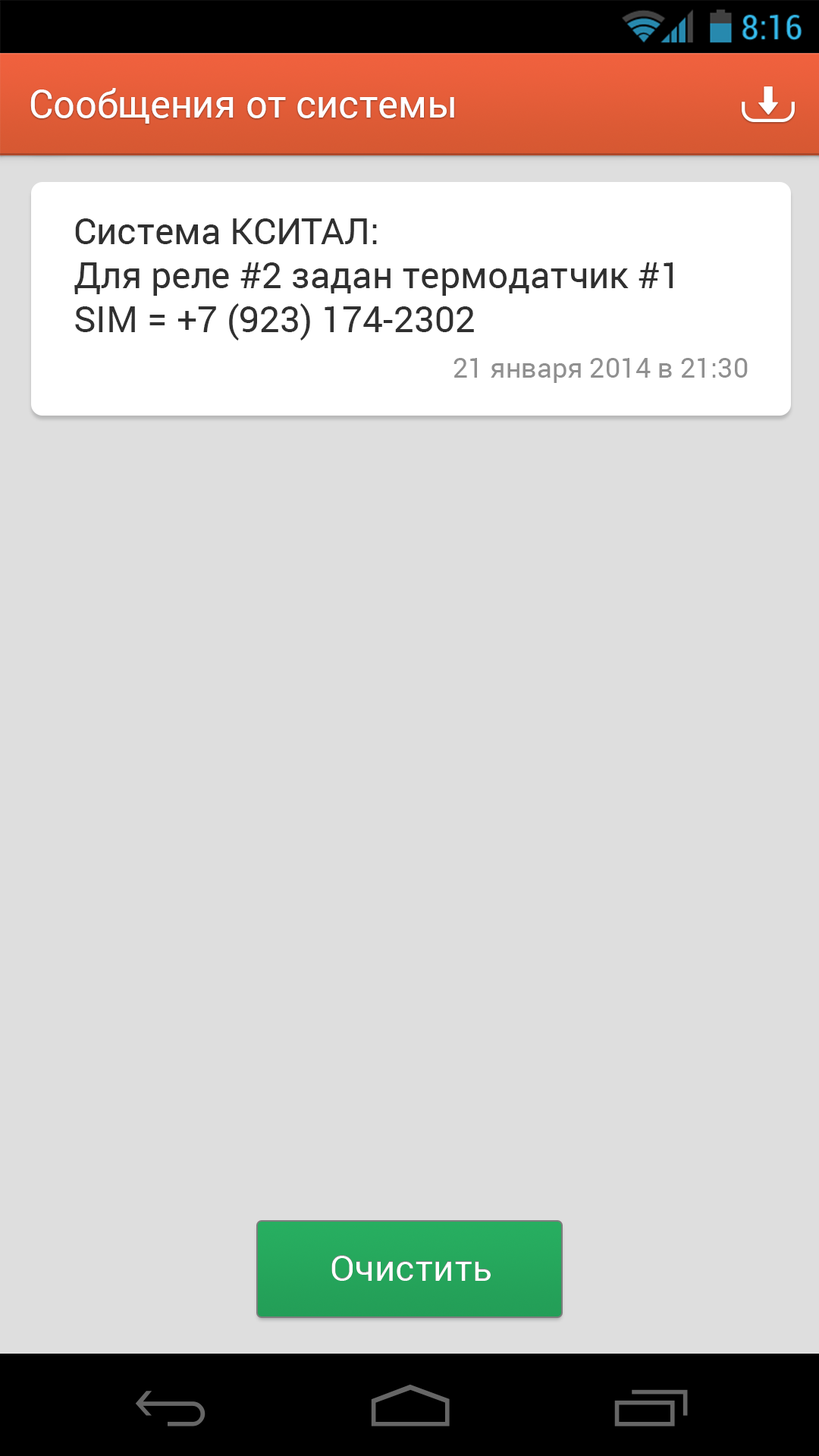
<style>
.page{position:relative;width:819px;height:1456px;background:#dedede}
.page>*{position:absolute;margin:0}
.t1{font:38.4px "Roboto-Regular";color:#ffffff}
.t2{font:36.4px "Roboto-Regular";color:#303030}
.t3{font:27.3px/45.5px "Roboto-Regular";color:#909090}
.t4{font:36.4px "Roboto-Regular";color:#ffffff}
</style>
<div class="page">
<p class="t1" style="left:30px;top:88px;width:424px;height:36px">Сообщения от системы</p>
<p class="t2" style="left:74px;top:218px;width:674px;height:165px">Система КСИТАЛ: <br>Для реле #2 задан термодатчик #1  SIM = +7 (923) 174-2302<br><span class="t3">21 января 2014 в 21:30</span></p>
<p class="t4" style="left:331px;top:1255px;width:160px;height:26px">Очистить</p>
</div>
